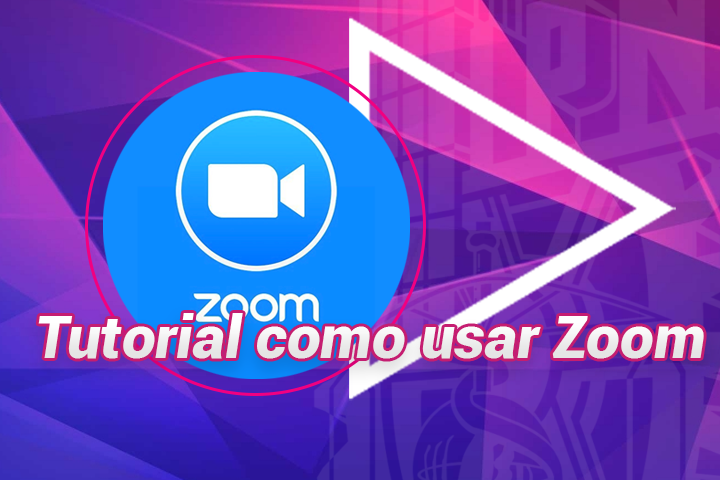
<style>
.page{position:relative;width:720px;height:480px}
.page>*{position:absolute;margin:0}
.t1{font:60px "Roboto-BlackItalic";color:#ffffff}
</style>
<div class="page">
<p class="t1" style="left:38px;top:313px;width:666px;height:46px">Tutorial como usar Zoom</p>
</div>
